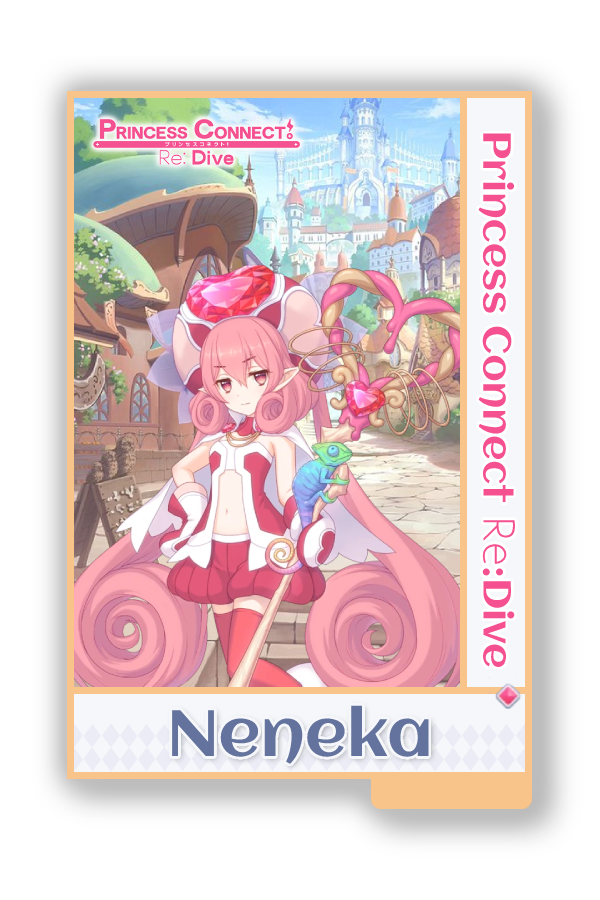
<style>
.page{position:relative;width:600px;height:900px;background:#ffffff}
.page>*{position:absolute;margin:0}
.t1{font:39px "Aclonica-Regular";color:#f55191}
.t2{font:39px "AaarghNormal";color:#f55191}
.t3{font:65px "Aclonica-Regular";color:#64739d}
</style>
<div class="page">
<p class="t1" style="left:478px;top:133px;width:38px;height:534px;rotate:90deg">Princess Connect <span class="t2">Re</span>:Dive</p>
<p class="t3" style="left:172px;top:705px;width:257px;height:59px">Neneka</p>
</div>
